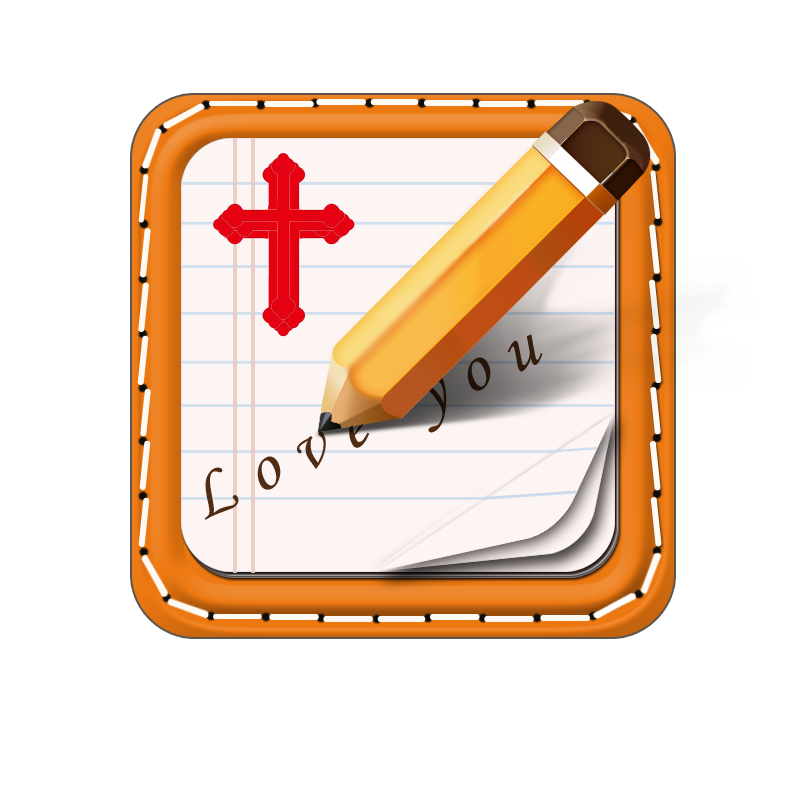
<style>
.page{position:relative;width:800px;height:800px;background:#ffffff}
.page>*{position:absolute;margin:0}
.t1{font:72px "STLiti";letter-spacing:0.28em}
</style>
<div class="page">
<p class="t1" style="left:205px;top:334px;width:338px;height:186px;rotate:-25deg">Love you</p>
</div>
